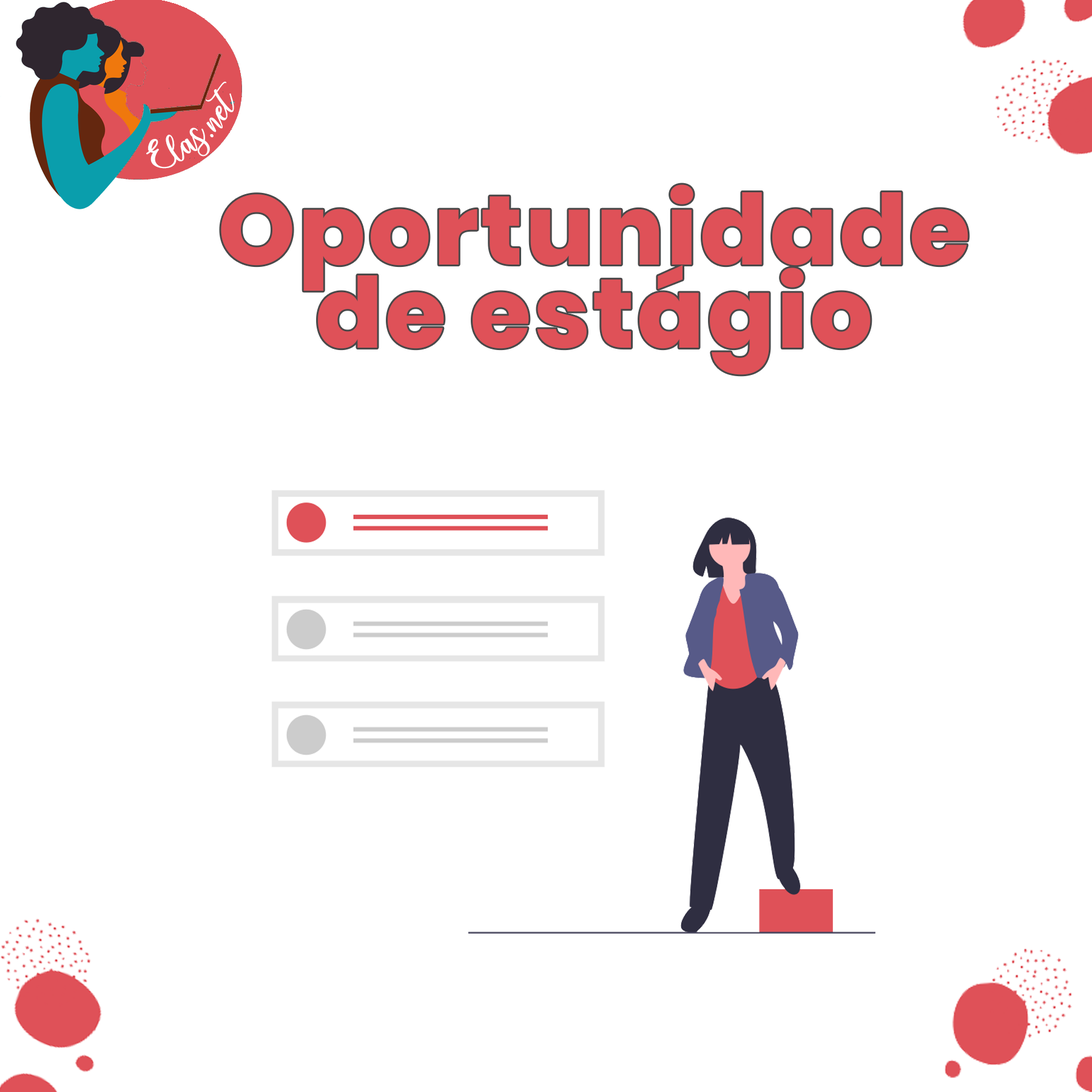
<style>
.page{position:relative;width:1092px;height:1092px;background:#ffffff}
.page>*{position:absolute;margin:0}
.t1{font:25px "charlinda-Regular";color:#ffffff;scale:1.18 1}
.t2{font:97.6px/83.1px "Poppins-ExtraBold";letter-spacing:0.03em;color:#df5158}
</style>
<div class="page">
<p class="t1" style="left:146px;top:81px;width:88px;height:88px;rotate:-42deg">Elas.net</p>
<p class="t2" style="left:221px;top:184px;width:747px;height:191px;text-align:center">Oportunidade<br>de estágio</p>
</div>
